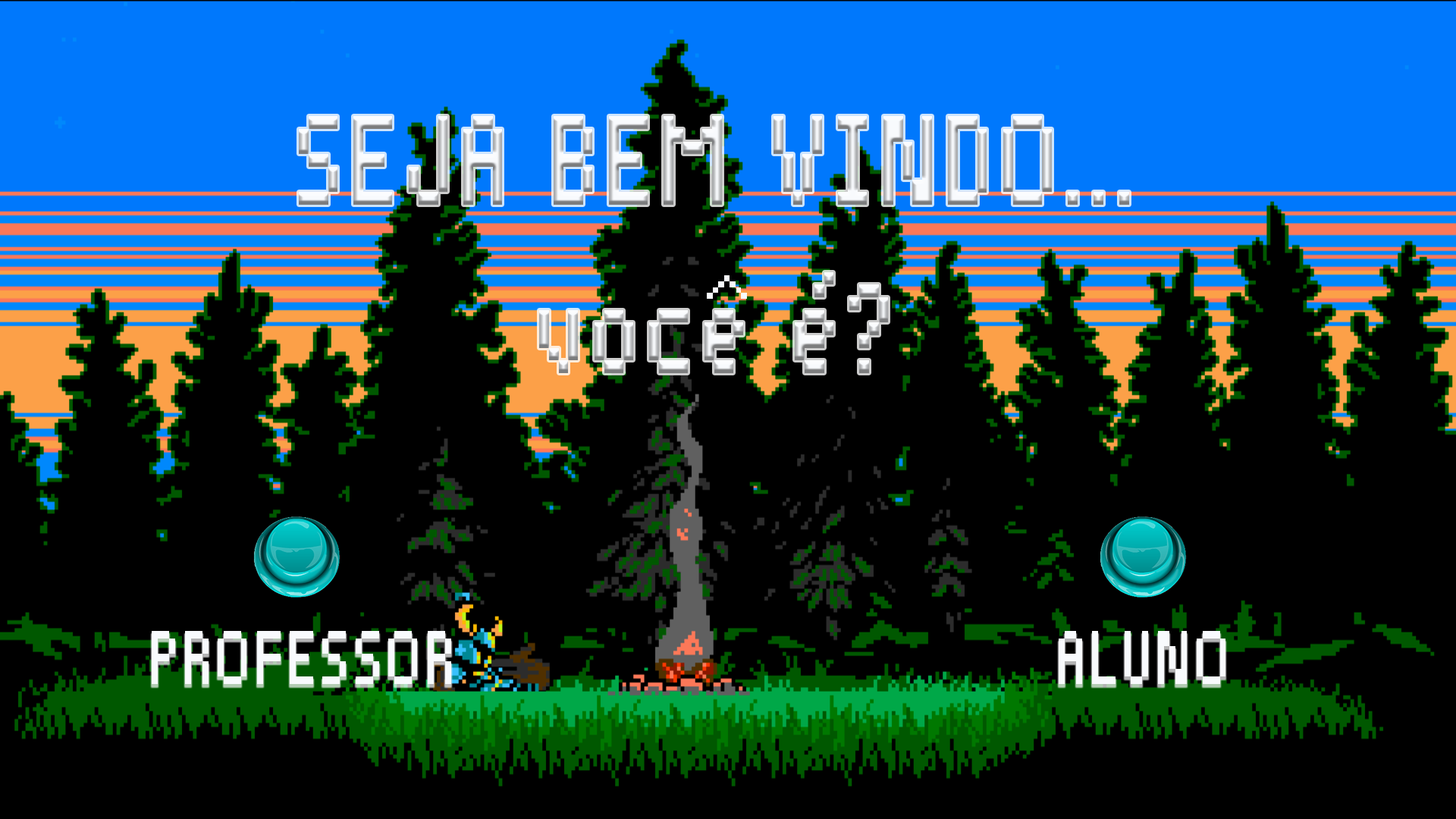
<style>
.page{position:relative;width:1456px;height:819px;background:#000000}
.page>*{position:absolute;margin:0}
.t1{font:164.3px/21.1px "Pixelade";letter-spacing:0.05em;scale:0.77 1}
.t2{font:74.5px "Pixelade";letter-spacing:0.05em;color:#f8fafd}
.t3{font:98.6px "Pixelade";letter-spacing:0.05em;color:#f8fafd;scale:0.77 1}
</style>
<div class="page">
<p class="t1" style="left:299px;top:116px;width:830px;height:257px;text-align:center">SEJA BEM VINDO...<br><br><br><br><br><br><br><br>voce é?</p>
<p class="t2" style="left:707px;top:275px;width:40px;height:24px;rotate:-90deg">&gt;</p>
<p class="t3" style="left:152px;top:631px;width:299px;height:53px">PROFESSOR</p>
<p class="t3" style="left:1059px;top:631px;width:166px;height:53px">ALUNO</p>
</div>
